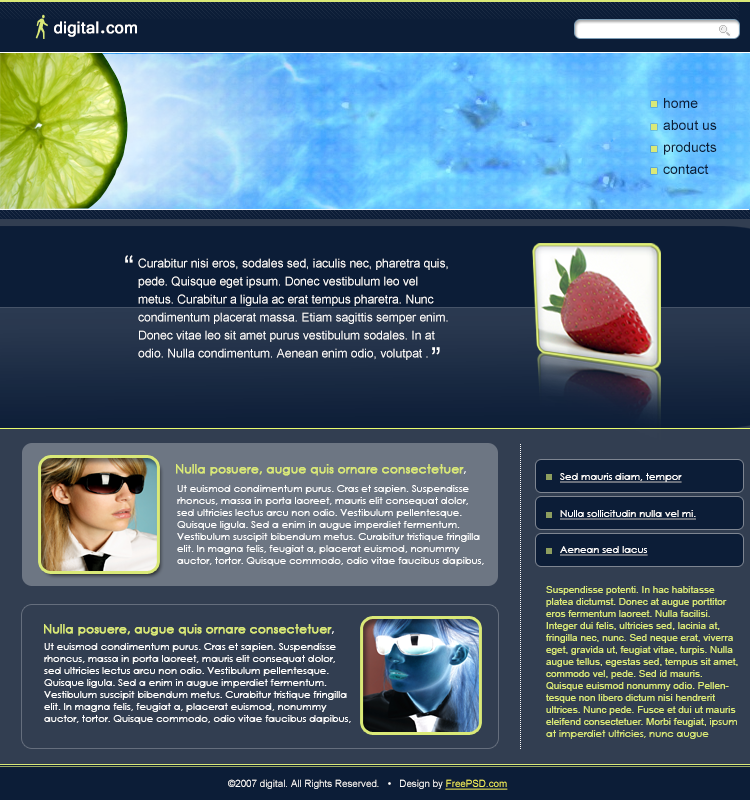
<style>
.page{position:relative;width:750px;height:800px;background:#323e51}
.page>*{position:absolute;margin:0}
.t1{font:18px "Vrinda";color:#ffffff;font-weight:bold}
.t2{font:14px/11px "ArialMT";color:#0c1d37}
.t3{font:30px "ArialMT";color:#ffffff}
.t4{font:12px/18px "ArialMT";color:#ffffff}
.t5{font:12px "CenturyGothic";color:#dae977;font-weight:bold}
.t6{font:12px "CenturyGothic";color:#ffffff}
.t7{font:10px "CenturyGothic";color:#ffffff;text-decoration:underline}
.t8{font:10px "CenturyGothic";color:#ffffff}
.t9{font:10px "ArialMT";color:#dae977}
.t10{font:10px "CenturyGothic";color:#dae977}
.t11{font:10px "ArialMT";color:#ffffff}
.t12{font:10px "ArialMT";color:#f8f65b;text-decoration:underline}
</style>
<div class="page">
<p class="t1" style="left:54px;top:21px;width:83px;height:16px">digital.com</p>
<p class="t2" style="left:663px;top:98px;width:54px;height:76px">home<br><br>about us<br><br>products<br><br>contact</p>
<p class="t3" style="left:125px;top:255px;width:8px;height:8px">“</p>
<p class="t4" style="left:138px;top:258px;width:310px;height:102px">Curabitur nisi eros, sodales sed, iaculis nec, pharetra quis, pede. Quisque eget ipsum. Donec vestibulum leo vel metus. Curabitur a ligula ac erat tempus pharetra. Nunc condimentum placerat massa. Etiam sagittis semper enim. Donec vitae leo sit amet purus vestibulum sodales. In at odio. Nulla condimentum. Aenean enim odio, volutpat .</p>
<p class="t3" style="left:432px;top:347px;width:8px;height:8px">”</p>
<p class="t5" style="left:176px;top:464px;width:290px;height:12px">Nulla posuere, augue quis ornare consectetuer<span class="t6">,</span></p>
<p class="t7" style="left:560px;top:473px;width:122px;height:10px">Sed mauris diam, tempor</p>
<p class="t8" style="left:177px;top:485px;width:307px;height:81px">Ut euismod condimentum purus. Cras et sapien. Suspendisse rhoncus, massa in porta laoreet, mauris elit consequat dolor, sed ultricies lectus arcu non odio. Vestibulum pellentesque. Quisque ligula. Sed a enim in augue imperdiet fermentum. Vestibulum suscipit bibendum metus. Curabitur tristique fringilla elit. In magna felis, feugiat a, placerat euismod, nonummy auctor, tortor. Quisque commodo, odio vitae faucibus dapibus, ante arcu venenatis dolor, non nonummy leo purus eu arcu. Phasellus sapien. Morbi scelerisque nisl a justo. Aenean vel mauris. Sed eros. Maecenas nec mauris. Aenean laoreet ornare augue. Fusce nisi. Nullam commodo augue at nibh. Etiam nisi elit, aliquet quis, vehicula eu, convallis sollicitudin, nibh.</p>
<p class="t7" style="left:560px;top:510px;width:136px;height:10px">Nulla sollicitudin nulla vel mi.</p>
<p class="t7" style="left:560px;top:546px;width:88px;height:10px">Aenean sed lacus</p>
<p class="t9" style="left:546px;top:586px;width:192px;height:153px">Suspendisse potenti. In hac habitasse platea dictumst. Donec at augue porttitor eros fermentum laoreet. Nulla facilisi. Integer dui felis, ultricies sed, lacinia at, fringilla nec, nunc. Sed neque erat, viverra eget, gravida ut, feugiat vitae, turpis. Nulla augue tellus, egestas sed, tempus sit amet, commodo vel, pede. Sed id mauris. Quisque euismod nonummy odio. Pellentesque non libero dictum nisi hendrerit ultrices. Nunc pede. Fusce et dui ut mauris eleifend consectetuer. Morbi feugiat,<span class="t10"> ipsum at imperdiet ultricies, nunc augue convallis velit, id pharetra enim turpis pharetra erat. Aenean tincidunt ultricies nibh. Aenean accumsan sagittis dui. Integer quis diam ut nulla viverra elementum.</span></p>
<p class="t5" style="left:44px;top:624px;width:290px;height:12px">Nulla posuere, augue quis ornare consectetuer<span class="t6">,</span></p>
<p class="t8" style="left:44px;top:643px;width:307px;height:81px">Ut euismod condimentum purus. Cras et sapien. Suspendisse rhoncus, massa in porta laoreet, mauris elit consequat dolor, sed ultricies lectus arcu non odio. Vestibulum pellentesque. Quisque ligula. Sed a enim in augue imperdiet fermentum. Vestibulum suscipit bibendum metus. Curabitur tristique fringilla elit. In magna felis, feugiat a, placerat euismod, nonummy auctor, tortor. Quisque commodo, odio vitae faucibus dapibus, ante arcu venenatis dolor, non nonummy leo purus eu arcu. Phasellus sapien. Morbi scelerisque nisl a justo. Aenean vel mauris. Sed eros. Maecenas nec mauris. Aenean laoreet ornare augue. Fusce nisi. Nullam commodo augue at nibh. Etiam nisi elit, aliquet quis, vehicula eu, convallis sollicitudin, nibh.</p>
<p class="t11" style="left:228px;top:779px;width:280px;height:11px">©2007 digital. All Rights Reserved.   •   Design by <span class="t12">FreePSD.com</span></p>
</div>
